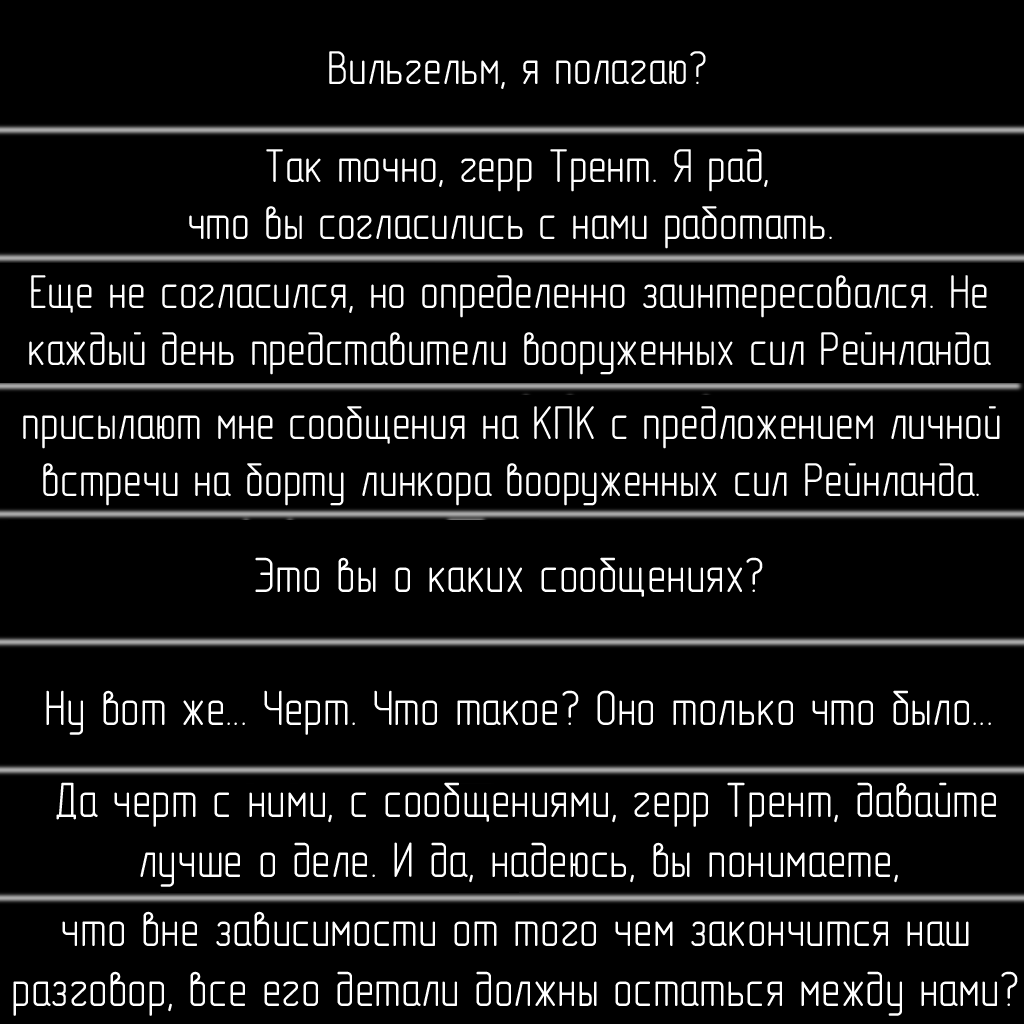
<style>
.page{position:relative;width:1024px;height:1024px;background:#000000}
.page>*{position:absolute;margin:0}
.t1{font:48px "GOST-2.304-81typeA";color:#ffffff}
.t2{font:50px "GOST-2.304-81typeA";color:#ffffff}
</style>
<div class="page">
<p class="t1" style="left:329px;top:51px;width:377px;height:38px">Вильгельм, я полагаю?</p>
<p class="t1" style="left:189px;top:149px;width:643px;height:100px;text-align:center">Так точно, герр Трент. Я рад,<br>что вы согласились с нами работать.</p>
<p class="t1" style="left:29px;top:275px;width:962px;height:100px;text-align:center">Еще не согласился, но определенно заинтересовался. Не<br>каждый день представители вооруженных сил Рейнланда</p>
<p class="t1" style="left:23px;top:406px;width:977px;height:100px;text-align:center">присылают мне сообщения на КПК с предложением личной<br>встречи на борту линкора вооруженных сил Рейнланда.</p>
<p class="t2" style="left:255px;top:557px;width:508px;height:40px">Это вы о каких сообщениях?</p>
<p class="t2" style="left:46px;top:690px;width:945px;height:45px">Ну вот же... Черт. Что такое? Оно только что было...</p>
<p class="t2" style="left:56px;top:782px;width:940px;height:105px;text-align:center">Да черт с ними, с сообщениями, герр Трент, давайте<br>лучше о деле. И да, надеюсь, вы понимаете,</p>
<p class="t2" style="left:13px;top:911px;width:1005px;height:105px;text-align:center">что вне зависимости от того чем закончится наш<br>разговор, все его детали должны остаться между нами?</p>
</div>
